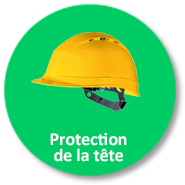
<style>
.page{position:relative;width:185px;height:185px;background:#00cc66}
.page>*{position:absolute;margin:0}
.t1{font:18px/16px "Calibri-Bold";color:#ffffff}
</style>
<div class="page">
<p class="t1" style="left:50px;top:133px;width:77px;height:29px;text-align:center">Protection <br>de la tête</p>
</div>
